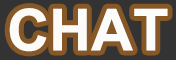
<style>
.page{position:relative;width:176px;height:60px;background:#333333}
.page>*{position:absolute;margin:0}
.t1{font:58px "Arial-BoldMT";color:#ffffff}
</style>
<div class="page">
<p class="t1" style="left:9px;top:8px;width:159px;height:44px">CHAT</p>
</div>
